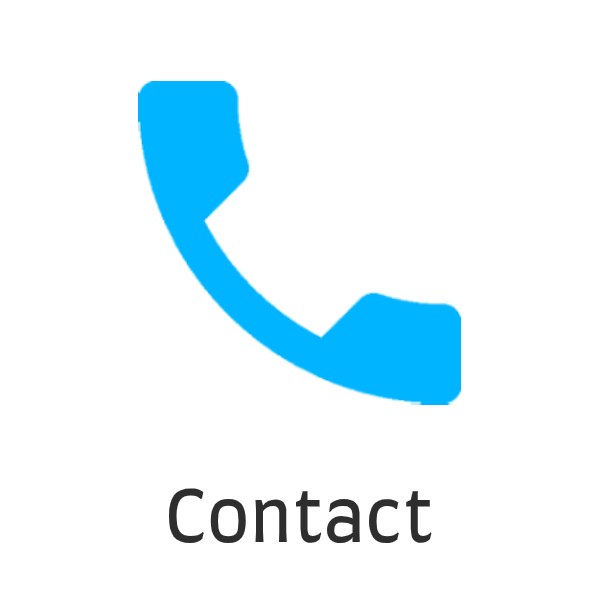
<style>
.page{position:relative;width:600px;height:600px;background:#ffffff}
.page>*{position:absolute;margin:0}
.t1{font:70px "Farro-Regular";color:#2e2e2e}
</style>
<div class="page">
<p class="t1" style="left:168px;top:488px;width:264px;height:56px">Contact</p>
</div>
